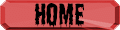
<style>
.page{position:relative;width:120px;height:30px;background:#da5f5f}
.page>*{position:absolute;margin:0}
.t1{font:30px "Shlop-Regular";color:#000000}
</style>
<div class="page">
<p class="t1" style="left:34px;top:3px;width:50px;height:26px">HOME</p>
</div>
